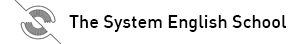
<style>
.page{position:relative;width:300px;height:44px;background:#ffffff}
.page>*{position:absolute;margin:0}
.t1{font:18px "DIN-Medium";color:#000000}
</style>
<div class="page">
<p class="t1" style="left:69px;top:15px;width:218px;height:17px">The System English School</p>
</div>
